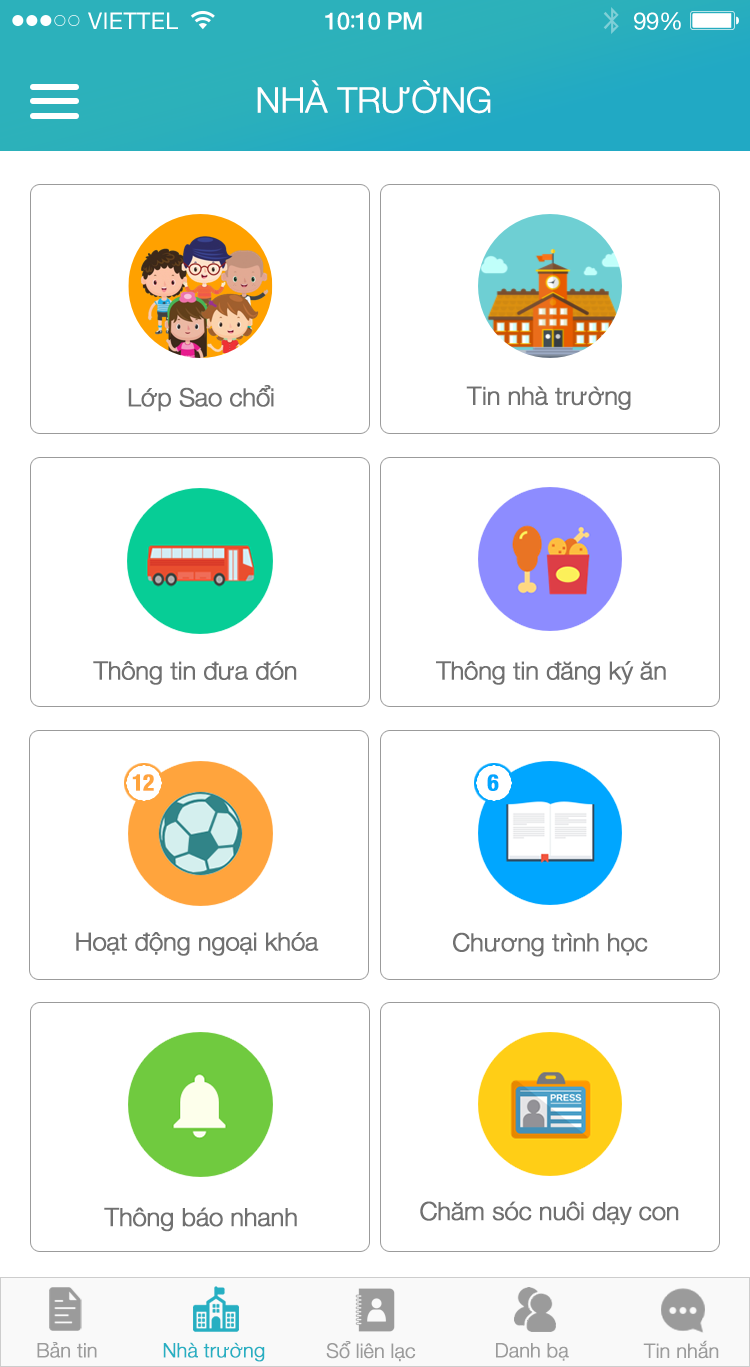
<style>
.page{position:relative;width:750px;height:1367px;background:#ffffff}
.page>*{position:absolute;margin:0}
.t1{font:23px "HelveticaNeue";letter-spacing:0.02em;color:#ffffff}
.t2{font:24px "HelveticaNeue-Medium";letter-spacing:-0.02em;color:#ffffff}
.t3{font:26px "MyriadPro-Regular";letter-spacing:-0.02em;color:#ffffff}
.t4{font:24px "HelveticaNeue";letter-spacing:-0.02em;color:#ffffff}
.t5{font:35px "HelveticaNeue-Light";letter-spacing:-0.02em;color:#ffffff;font-weight:bold}
.t6{font:25px "HelveticaNeue-Light";letter-spacing:-0.02em;color:#707070;font-weight:bold}
.t7{font:23px "HelveticaNeue-CondensedBold";letter-spacing:-0.02em;color:#ffa43d;font-weight:bold}
.t8{font:23px "HelveticaNeue-CondensedBold";letter-spacing:-0.02em;color:#00a6ff;font-weight:bold}
.t9{font:20px "HelveticaNeue-Light";letter-spacing:-0.02em;color:#9b9b9b;font-weight:bold}
.t10{font:20px "HelveticaNeue-Light";letter-spacing:-0.02em;color:#26afc2;font-weight:bold}
</style>
<div class="page">
<p class="t1" style="left:88px;top:12px;width:90px;height:17px">VIETTEL</p>
<p class="t2" style="left:325px;top:12px;width:97px;height:18px">10<span class="t3">:</span>10 PM</p>
<p class="t4" style="left:634px;top:12px;width:47px;height:18px">99%</p>
<p class="t5" style="left:257px;top:80px;width:234px;height:34px">NHÀ TRƯỜNG</p>
<p class="t6" style="left:128px;top:385px;width:146px;height:27px">Lớp Sao chổi</p>
<p class="t6" style="left:466px;top:386px;width:165px;height:24px">Tin nhà trường</p>
<p class="t6" style="left:93px;top:661px;width:204px;height:24px">Thông tin đưa đón</p>
<p class="t6" style="left:436px;top:661px;width:230px;height:24px">Thông tin đăng ký ăn</p>
<p class="t7" style="left:132px;top:774px;width:22px;height:17px">12</p>
<p class="t8" style="left:487px;top:774px;width:12px;height:17px">6</p>
<p class="t6" style="left:76px;top:932px;width:243px;height:24px">Hoạt động ngoại khóa</p>
<p class="t6" style="left:453px;top:932px;width:195px;height:25px">Chương trình học</p>
<p class="t6" style="left:420px;top:1201px;width:259px;height:24px">Chăm sóc nuôi dạy con</p>
<p class="t6" style="left:104px;top:1207px;width:193px;height:25px">Thông báo nhanh</p>
<p class="t9" style="left:37px;top:1342px;width:60px;height:16px">Bản tin</p>
<p class="t10" style="left:163px;top:1342px;width:102px;height:20px">Nhà trường</p>
<p class="t9" style="left:326px;top:1341px;width:90px;height:21px">Sổ liên lạc</p>
<p class="t9" style="left:496px;top:1343px;width:73px;height:18px">Danh bạ</p>
<p class="t9" style="left:643px;top:1340px;width:76px;height:19px">Tin nhắn</p>
</div>
